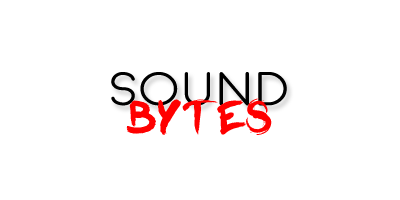
<style>
.page{position:relative;width:400px;height:200px;background:#ffffff}
.page>*{position:absolute;margin:0}
.t1{font:47.4px "Moon-Light";color:#000000;scale:1.1 1}
.t2{font:45.3px "Brocha-Regular";color:#ff0000;scale:1.14 1}
</style>
<div class="page">
<p class="t1" style="left:111px;top:72px;width:176px;height:34px">Sound</p>
<p class="t2" style="left:126px;top:98px;width:146px;height:37px">bytes</p>
</div>
